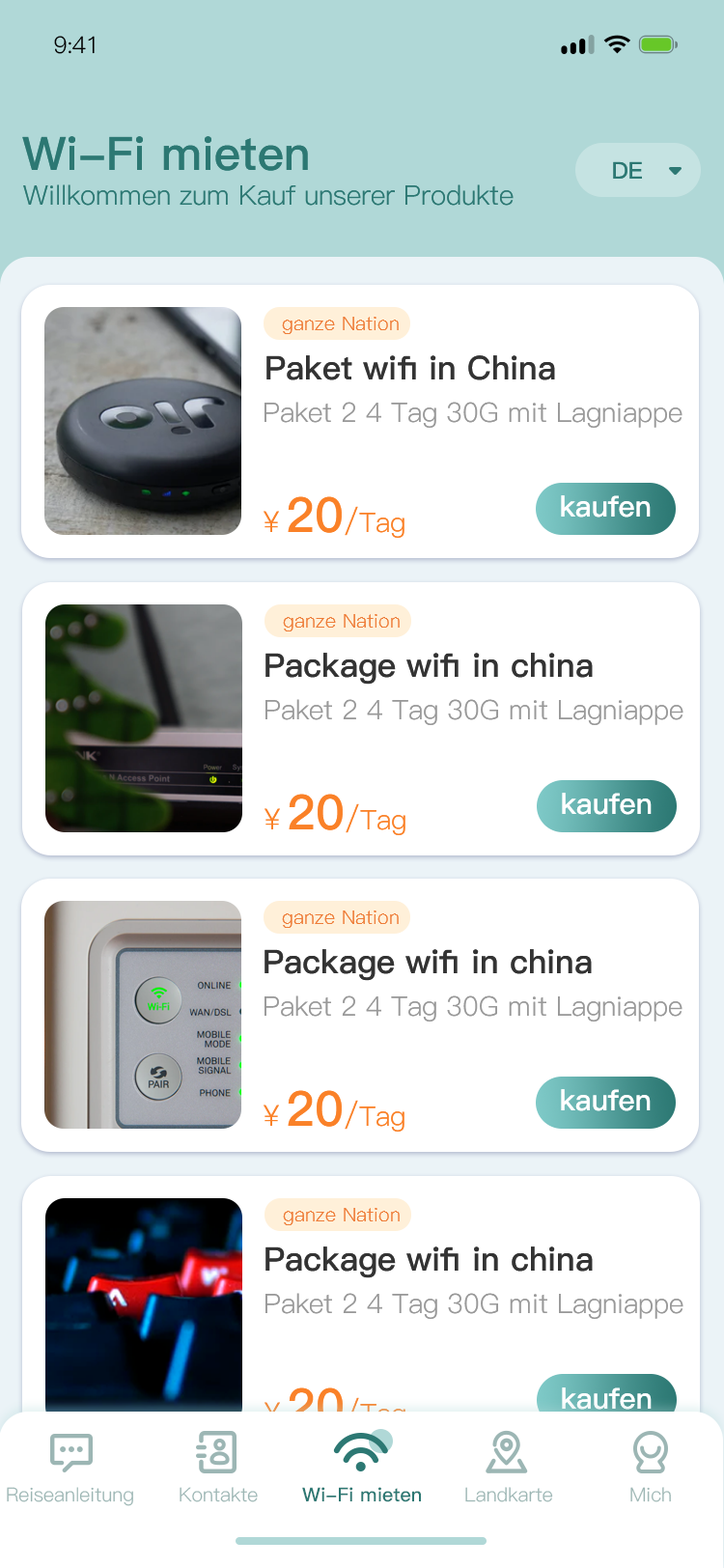
<style>
.page{position:relative;width:724px;height:1568px;background:#ffffff}
.page>*{position:absolute;margin:0}
.t1{font:23.2px "PingFang-SC-Regular";letter-spacing:-0.025em;color:#010000}
.t2{font:46.3px "PingFang-SC-Bold";color:#2c7873}
.t3{font:23.2px "PingFang-SC-Bold";color:#2c7873}
.t4{font:27px "PingFang-SC-Regular";color:#2c7873}
.t5{font:19.3px "PingFang-SC-Regular";color:#ee7d39}
.t6{font:32.8px "PingFang-SC-Bold";color:#333333}
.t7{font:27px "PingFang-SC-Regular";color:#999999}
.t8{font:27px "PingFang-SC-Regular";color:#fa8128}
.t9{font:29px "PingFang-SC-Regular";color:#fa8128}
.t10{font:48.3px "PingFang-SC-Bold";color:#fa8128}
.t11{font:30.9px "PingFang-SC-Regular";color:#fa8128}
.t12{font:29px "PingFang-SC-Bold";color:#ffffff}
.t13{font:32.8px "PingFang-SC-Bold";color:#333333;text-transform:uppercase}
.t14{font:27px "PingFang-SC-Regular"}
.t15{font:29px "PingFang-SC-Regular"}
.t16{font:48.3px "PingFang-SC-Bold"}
.t17{font:30.9px "PingFang-SC-Regular"}
.t18{font:19.3px "PingFang-SC-Regular";color:#9cb6b4}
.t19{font:19.3px "PingFang-SC-Bold";color:#2c7873}
.t20{font:19.3px "PingFang-SC-Regular";color:#9eb7b5}
</style>
<div class="page">
<p class="t1" style="left:54px;top:36px;width:41px;height:18px">9:41</p>
<p class="t2" style="left:22px;top:136px;width:286px;height:35px">Wi-Fi mieten</p>
<p class="t3" style="left:613px;top:161px;width:29px;height:18px">DE</p>
<p class="t4" style="left:23px;top:184px;width:491px;height:22px">Willkommen zum Kauf unserer Produkte</p>
<p class="t5" style="left:282px;top:317px;width:117px;height:17px">ganze Nation</p>
<p class="t6" style="left:266px;top:355px;width:289px;height:25px">Paket wifi in China</p>
<p class="t7" style="left:265px;top:402px;width:418px;height:26px">Paket 2 4 Tag 30G mit Lagniappe</p>
<p class="t8" style="left:264px;top:496px;width:141px;height:42px"><span class="t9">￥</span><span class="t10">20</span><span class="t11">/</span>Tag</p>
<p class="t12" style="left:561px;top:495px;width:90px;height:23px">kaufen</p>
<p class="t5" style="left:283px;top:614px;width:117px;height:17px">ganze Nation</p>
<p class="t6" style="left:266px;top:653px;width:327px;height:32px"><span class="t13">p</span>ackage wifi in china</p>
<p class="t7" style="left:266px;top:699px;width:418px;height:26px">Paket 2 4 Tag 30G mit Lagniappe</p>
<p class="t8" style="left:265px;top:794px;width:141px;height:41px"><span class="t9">￥</span><span class="t10">20</span><span class="t11">/</span>Tag</p>
<p class="t12" style="left:562px;top:793px;width:90px;height:22px">kaufen</p>
<p class="t5" style="left:282px;top:910px;width:117px;height:18px">ganze Nation</p>
<p class="t6" style="left:265px;top:949px;width:327px;height:32px"><span class="t13">p</span>ackage wifi in china</p>
<p class="t7" style="left:265px;top:995px;width:418px;height:27px">Paket 2 4 Tag 30G mit Lagniappe</p>
<p class="t8" style="left:264px;top:1090px;width:141px;height:42px"><span class="t9">￥</span><span class="t10">20</span><span class="t11">/</span>Tag</p>
<p class="t12" style="left:561px;top:1089px;width:90px;height:22px">kaufen</p>
<p class="t5" style="left:283px;top:1208px;width:117px;height:17px">ganze Nation</p>
<p class="t6" style="left:266px;top:1246px;width:327px;height:32px"><span class="t13">p</span>ackage wifi in china</p>
<p class="t7" style="left:266px;top:1293px;width:418px;height:26px">Paket 2 4 Tag 30G mit Lagniappe</p>
<p class="t14" style="left:265px;top:1387px;width:141px;height:42px"><span class="t15">￥</span><span class="t16">20</span><span class="t17">/</span>Tag</p>
<p class="t12" style="left:562px;top:1387px;width:90px;height:23px">kaufen</p>
<p class="t18" style="left:7px;top:1487px;width:126px;height:19px">Reiseanleitung</p>
<p class="t18" style="left:180px;top:1487px;width:78px;height:15px">Kontakte</p>
<p class="t19" style="left:302px;top:1487px;width:119px;height:15px">Wi-Fi mieten</p>
<p class="t18" style="left:465px;top:1487px;width:88px;height:15px">Landkarte</p>
<p class="t20" style="left:630px;top:1487px;width:41px;height:15px">Mich</p>
</div>
